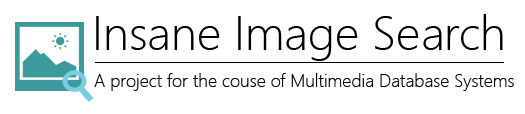
<style>
.page{position:relative;width:525px;height:114px;background:#ffffff}
.page>*{position:absolute;margin:0}
.t1{font:48px "SegoeUI-Light";color:#000000}
.t2{font:18px "SegoeUI-Light";color:#000000}
</style>
<div class="page">
<p class="t1" style="left:96px;top:14px;width:407px;height:47px">Insane Image Search</p>
<p class="t2" style="left:94px;top:73px;width:420px;height:18px">A project for the couse of Multimedia Database Systems</p>
</div>
